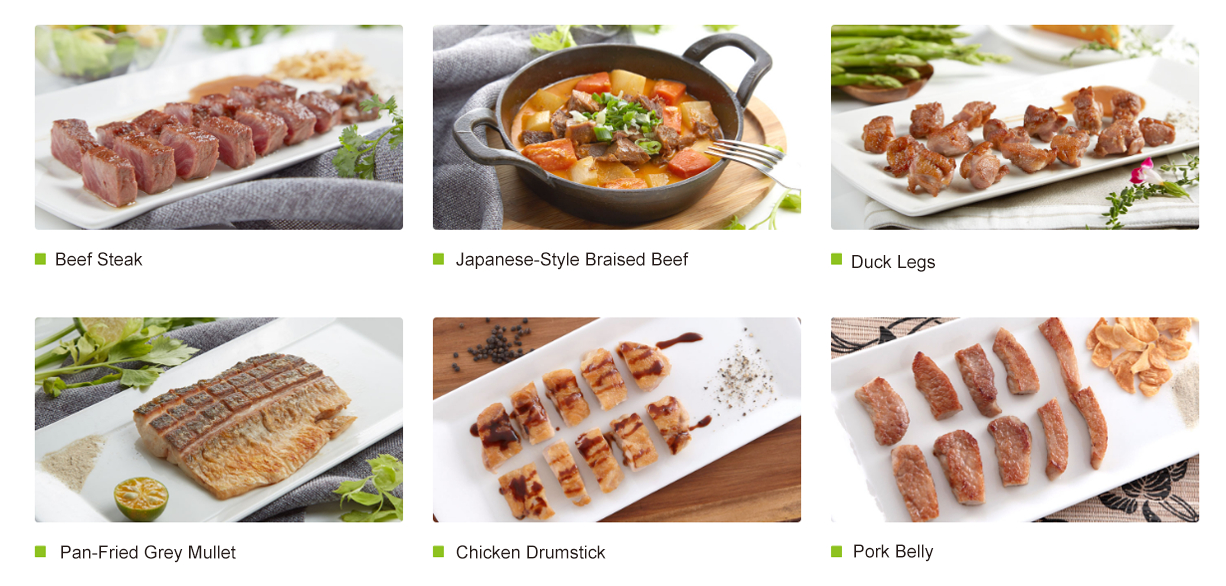
<style>
.page{position:relative;width:1226px;height:586px;background:#ffffff}
.page>*{position:absolute;margin:0}
.t1{font:18px "ArialMT";color:#231815}
</style>
<div class="page">
<p class="t1" style="left:56px;top:252px;width:87px;height:14px">Beef Steak</p>
<p class="t1" style="left:456px;top:252px;width:233px;height:18px">Japanese-Style Braised Beef</p>
<p class="t1" style="left:852px;top:255px;width:83px;height:17px">Duck Legs</p>
<p class="t1" style="left:61px;top:545px;width:175px;height:18px">Pan-Fried Grey Mullet</p>
<p class="t1" style="left:456px;top:545px;width:150px;height:14px">Chicken Drumstick</p>
<p class="t1" style="left:854px;top:544px;width:80px;height:18px">Pork Belly</p>
</div>
